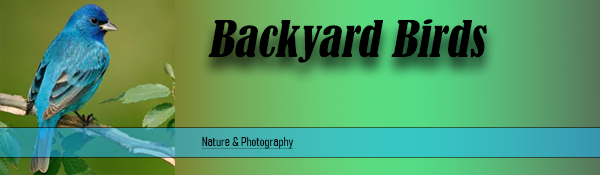
<style>
.page{position:relative;width:600px;height:175px}
.page>*{position:absolute;margin:0}
.t1{font:47.1px "BernardMT-Condensed";color:#000000;font-style:italic}
.t2{font:12.5px "Bahnschrift-LightCondensed";color:#000000;font-style:italic;text-decoration:underline}
</style>
<div class="page">
<p class="t1" style="left:208px;top:19px;width:279px;height:44px">Backyard Birds</p>
<p class="t2" style="left:201px;top:136px;width:93px;height:13px">Nature &amp; Photography</p>
</div>
